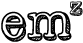
<style>
.page{position:relative;width:83px;height:43px;background:#ffffff}
.page>*{position:absolute;margin:0}
.t1{font:24px "VintageOne";color:#000000}
.t2{font:48px "VintageOne";color:#000000}
</style>
<div class="page">
<p class="t1" style="left:69px;top:1px;width:14px;height:15px">z</p>
<p class="t2" style="left:1px;top:11px;width:71px;height:31px">em</p>
</div>
